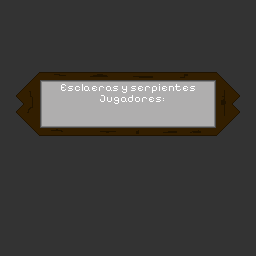
<style>
.page{position:relative;width:256px;height:256px;background:#333333}
.page>*{position:absolute;margin:0}
.t1{font:11px "PixelifySans-Medium";color:#ffffff}
</style>
<div class="page">
<p class="t1" style="left:61px;top:84px;width:134px;height:9px">Esclaeras y serpientes</p>
<p class="t1" style="left:100px;top:95px;width:64px;height:9px">Jugadores:</p>
</div>
